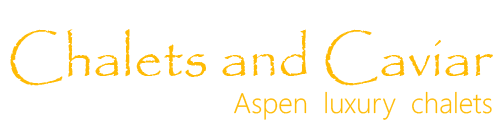
<style>
.page{position:relative;width:500px;height:140px;background:#ffffff}
.page>*{position:absolute;margin:0}
.t1{font:56.7px "Papyrus-Regular";color:#ffbb05}
.t2{font:28.4px "SegoeUI-Light";color:#ffbb05}
</style>
<div class="page">
<p class="t1" style="left:10px;top:29px;width:483px;height:57px">Chalets and Caviar</p>
<p class="t2" style="left:234px;top:91px;width:258px;height:29px">Aspen  luxury  chalets</p>
</div>
